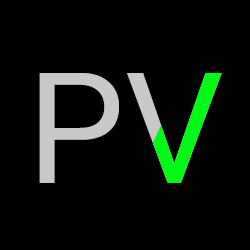
<style>
.page{position:relative;width:250px;height:250px;background:#000000}
.page>*{position:absolute;margin:0}
.t1{font:154.7px "Roboto-Regular";color:#c8c8c8}
</style>
<div class="page">
<p class="t1" style="left:39px;top:73px;width:183px;height:110px">PV</p>
</div>
